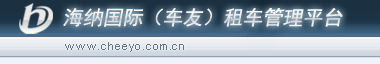
<style>
.page{position:relative;width:380px;height:64px}
.page>*{position:absolute;margin:0}
.t1{font:20px "SimHei";color:#ffffff;font-style:italic}
.t2{font:11px "ArialMT";letter-spacing:0.075em;color:#607685}
</style>
<div class="page">
<p class="t1" style="left:63px;top:7px;width:280px;height:20px">海纳国际（车友）租车管理平台</p>
<p class="t2" style="left:65px;top:42px;width:119px;height:10px">www.cheeyo.com.cn</p>
</div>
